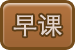
<style>
.page{position:relative;width:75px;height:50px}
.page>*{position:absolute;margin:0}
.t1{font:24.1px "STHeitiSC-Light";color:#e4d4ca;scale:1.03 1}
</style>
<div class="page">
<p class="t1" style="left:13px;top:14px;width:49px;height:23px">早课</p>
</div>
